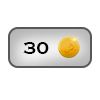
<style>
.page{position:relative;width:100px;height:100px;background:#ffffff}
.page>*{position:absolute;margin:0}
.t1{font:18px "CopperplateGothic-Bold";color:#020202}
</style>
<div class="page">
<p class="t1" style="left:23px;top:42px;width:26px;height:12px">30</p>
</div>
